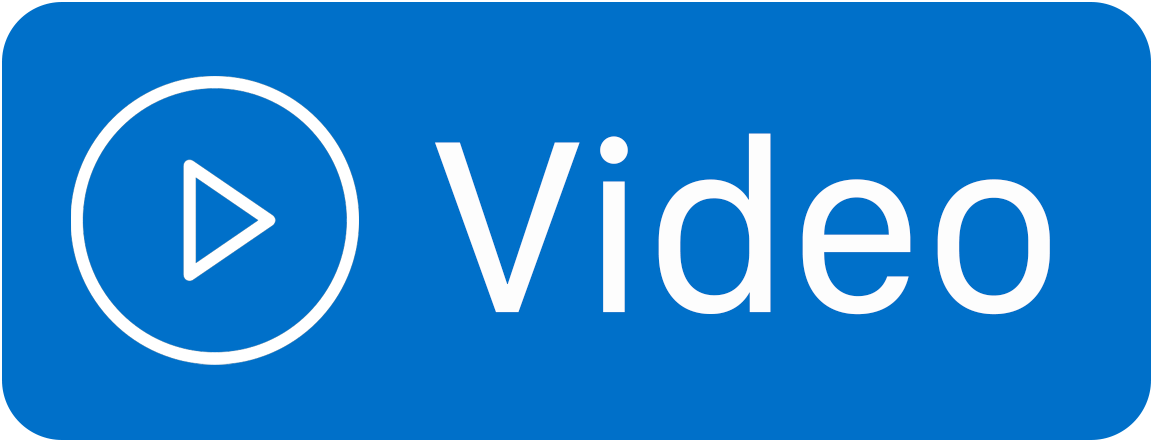
<style>
.page{position:relative;width:1155px;height:442px;background:#0070c9}
.page>*{position:absolute;margin:0}
.t1{font:254.2px "SFCompactDisplay-Regular";color:#fdfdfd}
</style>
<div class="page">
<p class="t1" style="left:435px;top:133px;width:615px;height:182px">Video</p>
</div>
